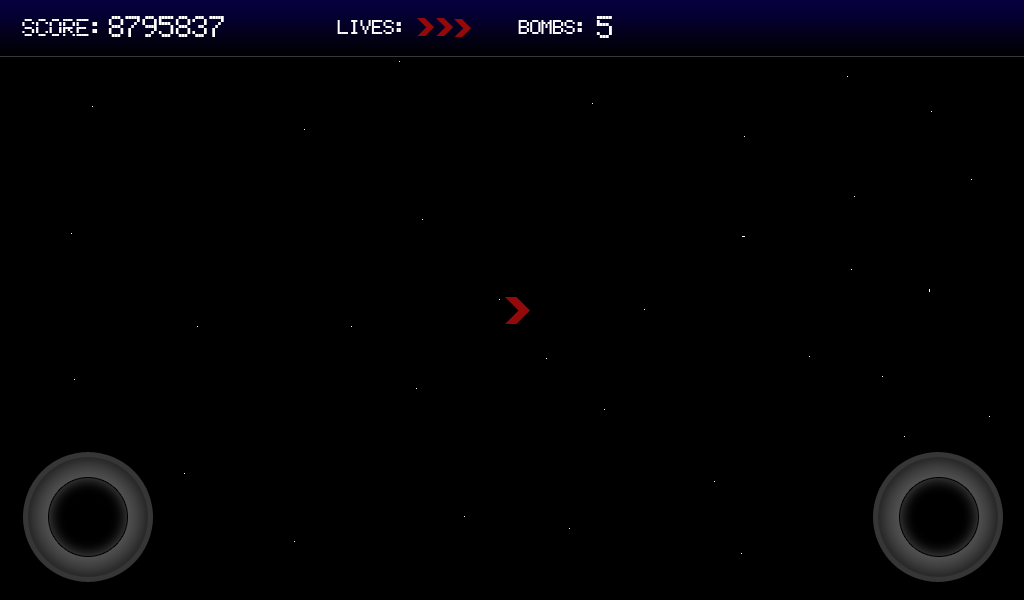
<style>
.page{position:relative;width:1024px;height:600px;background:#000000}
.page>*{position:absolute;margin:0}
.t1{font:47px "ElectronicHighwaySign";color:#ffffff}
.t2{font:48px "ElectronicHighwaySign";color:#ffffff}
.t3{font:38px "ElectronicHighwaySign";color:#ffffff}
.t4{font:32px "ElectronicHighwaySign";color:#ffffff}
</style>
<div class="page">
<p class="t1" style="left:108px;top:16px;width:116px;height:21px">8795837</p>
<p class="t2" style="left:596px;top:16px;width:16px;height:22px">5</p>
<p class="t3" style="left:22px;top:19px;width:76px;height:17px">SCORE:</p>
<p class="t4" style="left:337px;top:20px;width:64px;height:14px">Lives:</p>
<p class="t4" style="left:518px;top:20px;width:64px;height:14px">Bombs:</p>
</div>
